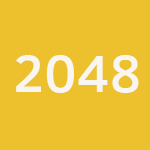
<style>
.page{position:relative;width:150px;height:150px;background:#ecc12d}
.page>*{position:absolute;margin:0}
.t1{font:52.9px "ClearSans-Medium";color:#f9f6f2}
</style>
<div class="page">
<p class="t1" style="left:16px;top:55px;width:123px;height:38px">2048</p>
</div>
